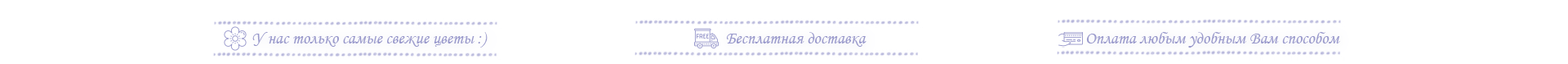
<style>
.page{position:relative;width:1568px;height:64px;background:#ffffff}
.page>*{position:absolute;margin:0}
.t1{font:17.1px "MonotypeCorsiva";color:#9999cc}
</style>
<div class="page">
<p class="t1" style="left:252px;top:32px;width:236px;height:15px">У нас только самые свежие цветы :)</p>
<p class="t1" style="left:726px;top:32px;width:140px;height:15px">Бесплатная доставка</p>
<p class="t1" style="left:1086px;top:32px;width:254px;height:15px">Оплата любым удобным Вам способом</p>
</div>
